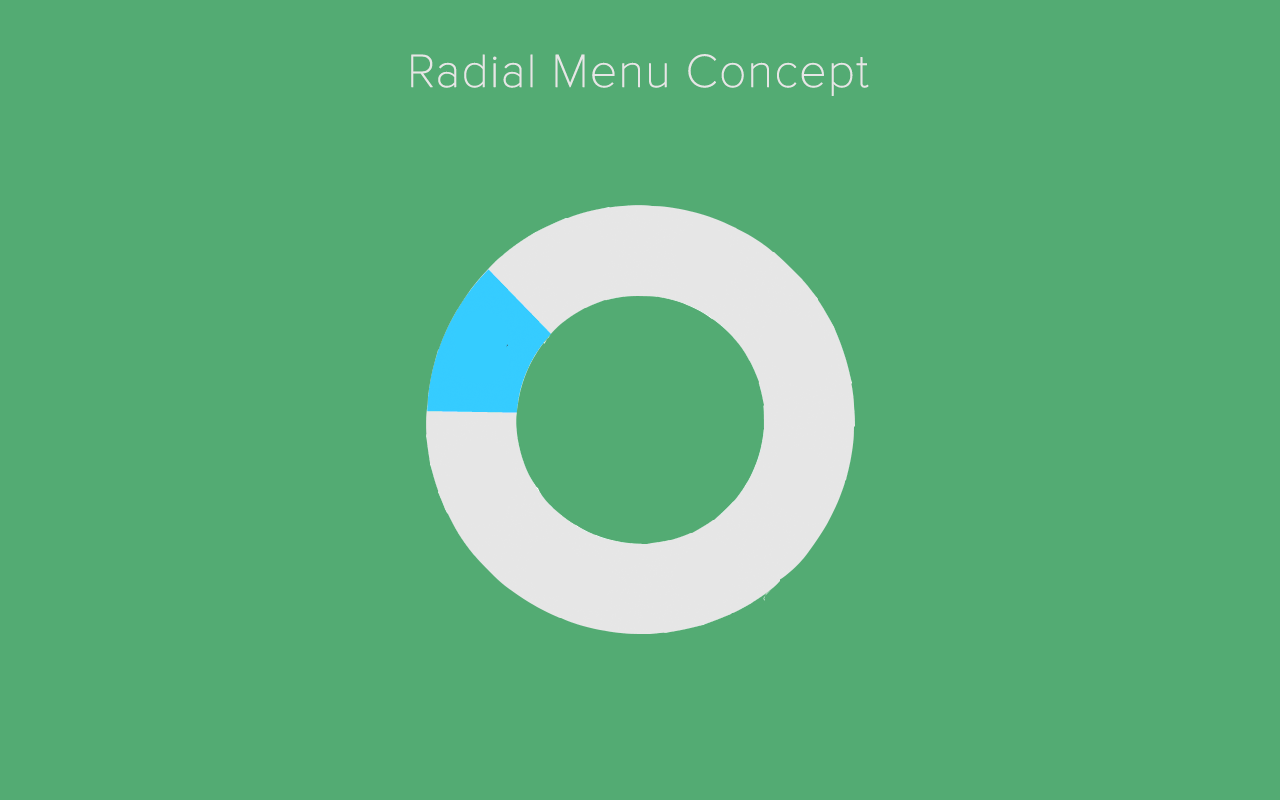
<style>
.page{position:relative;width:1280px;height:800px;background:#53ab73}
.page>*{position:absolute;margin:0}
.t1{font:48px "ProximaNova-Thin";color:#e6e6e6;font-weight:bold}
</style>
<div class="page">
<p class="t1" style="left:411px;top:54px;width:458px;height:42px">Radial Menu Concept</p>
</div>
